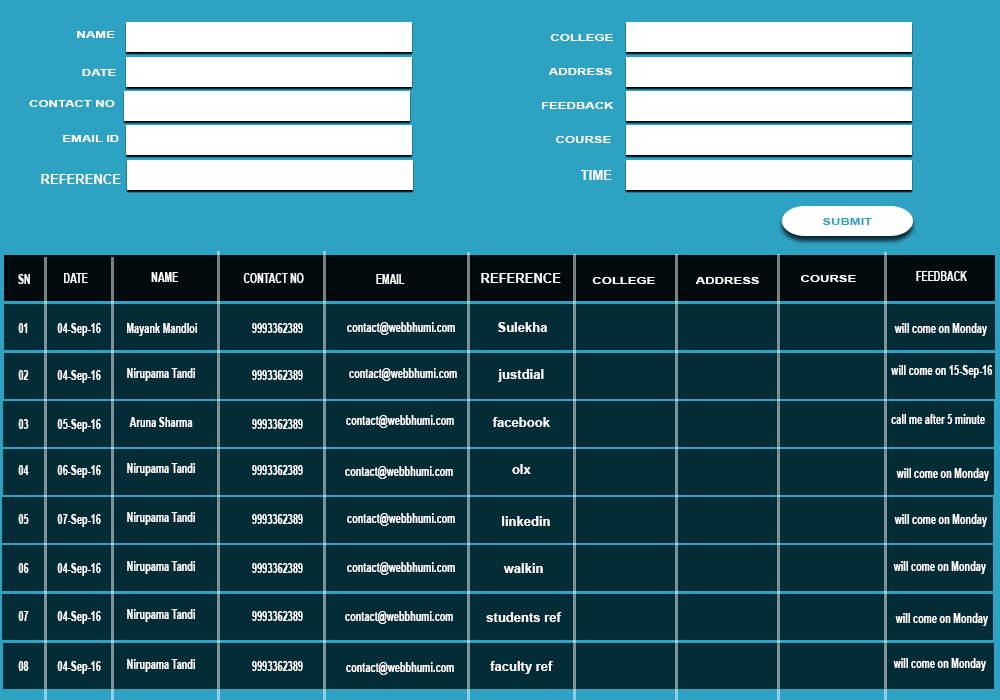
<style>
.page{position:relative;width:1000px;height:700px;background:#042c37}
.page>*{position:absolute;margin:0}
.t1{font:10px "Arial-BoldMT";color:#ffffff;scale:1.3 1}
.t2{font:12.9px "Arial-BoldMT";color:#ffffff}
.t3{font:10px "Arial-BoldMT";color:#2ea2c3;scale:1.3 1}
.t4{font:12.9px "Arial-BoldMT";color:#ffffff;scale:0.71 1}
</style>
<div class="page">
<p class="t1" style="left:77px;top:31px;width:38px;height:7px">NAME</p>
<p class="t1" style="left:550px;top:34px;width:63px;height:7px">COLLEGE</p>
<p class="t1" style="left:82px;top:69px;width:34px;height:7px">DATE</p>
<p class="t1" style="left:548px;top:68px;width:64px;height:7px">ADDRESS</p>
<p class="t1" style="left:29px;top:100px;width:86px;height:7px">CONTACT NO</p>
<p class="t1" style="left:542px;top:102px;width:72px;height:7px">FEEDBACK</p>
<p class="t1" style="left:63px;top:135px;width:56px;height:7px">EMAIL ID</p>
<p class="t1" style="left:556px;top:136px;width:55px;height:7px">COURSE</p>
<p class="t2" style="left:41px;top:174px;width:80px;height:10px">REFERENCE</p>
<p class="t2" style="left:580px;top:170px;width:32px;height:10px">TIME</p>
<p class="t3" style="left:822px;top:218px;width:50px;height:7px">SUBMIT</p>
<p class="t4" style="left:18px;top:274px;width:12px;height:10px">SN</p>
<p class="t4" style="left:64px;top:273px;width:24px;height:10px">DATE</p>
<p class="t4" style="left:151px;top:272px;width:27px;height:10px">NAME</p>
<p class="t4" style="left:243px;top:273px;width:61px;height:10px">CONTACT NO</p>
<p class="t4" style="left:376px;top:274px;width:29px;height:10px">EMAIL</p>
<p class="t2" style="left:481px;top:273px;width:80px;height:10px">REFERENCE</p>
<p class="t1" style="left:592px;top:277px;width:63px;height:7px">COLLEGE</p>
<p class="t1" style="left:695px;top:277px;width:64px;height:7px">ADDRESS</p>
<p class="t1" style="left:801px;top:275px;width:55px;height:7px">COURSE</p>
<p class="t4" style="left:916px;top:271px;width:51px;height:10px">FEEDBACK</p>
<p class="t4" style="left:18px;top:323px;width:10px;height:10px">01</p>
<p class="t4" style="left:57px;top:323px;width:44px;height:13px">04-Sep-16</p>
<p class="t4" style="left:127px;top:323px;width:70px;height:13px">Mayank Mandloi</p>
<p class="t4" style="left:252px;top:323px;width:51px;height:10px">9993362389</p>
<p class="t4" style="left:347px;top:322px;width:108px;height:13px">contact@webbhumi.com</p>
<p class="t2" style="left:498px;top:322px;width:49px;height:10px">Sulekha</p>
<p class="t4" style="left:894px;top:323px;width:93px;height:13px">will come on Monday</p>
<p class="t4" style="left:891px;top:365px;width:102px;height:13px">will come on 15-Sep-16</p>
<p class="t4" style="left:18px;top:370px;width:11px;height:10px">02</p>
<p class="t4" style="left:57px;top:370px;width:44px;height:13px">04-Sep-16</p>
<p class="t4" style="left:127px;top:368px;width:68px;height:13px">Nirupama Tandi</p>
<p class="t4" style="left:252px;top:370px;width:51px;height:10px">9993362389</p>
<p class="t4" style="left:349px;top:368px;width:108px;height:13px">contact@webbhumi.com</p>
<p class="t2" style="left:498px;top:369px;width:46px;height:13px">justdial</p>
<p class="t4" style="left:891px;top:414px;width:94px;height:10px">call me after 5 minute</p>
<p class="t4" style="left:18px;top:419px;width:11px;height:10px">03</p>
<p class="t4" style="left:57px;top:419px;width:44px;height:13px">05-Sep-16</p>
<p class="t4" style="left:129px;top:417px;width:64px;height:10px">Aruna Sharma</p>
<p class="t4" style="left:252px;top:419px;width:51px;height:10px">9993362389</p>
<p class="t4" style="left:346px;top:415px;width:108px;height:13px">contact@webbhumi.com</p>
<p class="t2" style="left:492px;top:417px;width:58px;height:10px">facebook</p>
<p class="t4" style="left:18px;top:465px;width:11px;height:10px">04</p>
<p class="t4" style="left:57px;top:465px;width:44px;height:13px">06-Sep-16</p>
<p class="t4" style="left:127px;top:463px;width:68px;height:13px">Nirupama Tandi</p>
<p class="t4" style="left:252px;top:465px;width:51px;height:10px">9993362389</p>
<p class="t4" style="left:345px;top:466px;width:108px;height:13px">contact@webbhumi.com</p>
<p class="t2" style="left:512px;top:464px;width:19px;height:10px">olx</p>
<p class="t4" style="left:896px;top:468px;width:93px;height:13px">will come on Monday</p>
<p class="t4" style="left:18px;top:514px;width:11px;height:10px">05</p>
<p class="t4" style="left:57px;top:514px;width:44px;height:13px">07-Sep-16</p>
<p class="t4" style="left:127px;top:512px;width:68px;height:13px">Nirupama Tandi</p>
<p class="t4" style="left:252px;top:514px;width:51px;height:10px">9993362389</p>
<p class="t4" style="left:347px;top:513px;width:108px;height:13px">contact@webbhumi.com</p>
<p class="t2" style="left:502px;top:516px;width:48px;height:10px">linkedin</p>
<p class="t4" style="left:894px;top:514px;width:93px;height:13px">will come on Monday</p>
<p class="t4" style="left:18px;top:563px;width:11px;height:10px">06</p>
<p class="t4" style="left:57px;top:563px;width:44px;height:13px">04-Sep-16</p>
<p class="t4" style="left:127px;top:561px;width:68px;height:13px">Nirupama Tandi</p>
<p class="t4" style="left:252px;top:563px;width:51px;height:10px">9993362389</p>
<p class="t4" style="left:347px;top:562px;width:108px;height:13px">contact@webbhumi.com</p>
<p class="t2" style="left:503px;top:563px;width:40px;height:10px">walkin</p>
<p class="t4" style="left:893px;top:561px;width:93px;height:13px">will come on Monday</p>
<p class="t4" style="left:18px;top:611px;width:11px;height:10px">07</p>
<p class="t4" style="left:57px;top:611px;width:44px;height:13px">04-Sep-16</p>
<p class="t4" style="left:127px;top:609px;width:68px;height:13px">Nirupama Tandi</p>
<p class="t4" style="left:252px;top:611px;width:51px;height:10px">9993362389</p>
<p class="t4" style="left:345px;top:611px;width:108px;height:13px">contact@webbhumi.com</p>
<p class="t2" style="left:486px;top:612px;width:76px;height:10px">students ref</p>
<p class="t4" style="left:895px;top:613px;width:93px;height:13px">will come on Monday</p>
<p class="t4" style="left:18px;top:661px;width:11px;height:10px">08</p>
<p class="t4" style="left:57px;top:661px;width:44px;height:13px">04-Sep-16</p>
<p class="t4" style="left:127px;top:659px;width:68px;height:13px">Nirupama Tandi</p>
<p class="t4" style="left:252px;top:661px;width:51px;height:10px">9993362389</p>
<p class="t4" style="left:346px;top:662px;width:108px;height:13px">contact@webbhumi.com</p>
<p class="t2" style="left:490px;top:661px;width:63px;height:13px">faculty ref</p>
<p class="t4" style="left:893px;top:658px;width:93px;height:13px">will come on Monday</p>
</div>
